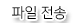
<style>
.page{position:relative;width:75px;height:23px;background:#ffffff}
.page>*{position:absolute;margin:0}
.t1{font:14px "NanumSquareL";color:#000000}
</style>
<div class="page">
<p class="t1" style="left:12px;top:6px;width:54px;height:14px">파일 전송</p>
</div>
